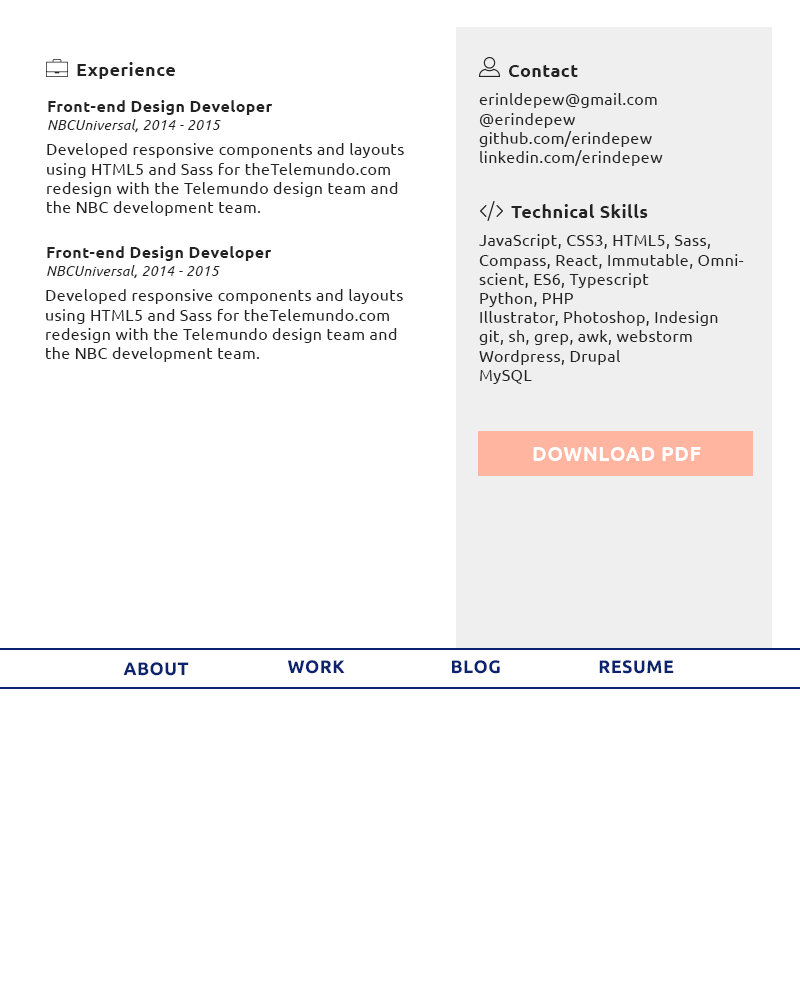
<style>
.page{position:relative;width:800px;height:1000px;background:#ffffff}
.page>*{position:absolute;margin:0}
.t1{font:18px "Ubuntu-Bold";letter-spacing:0.025em;color:#232323}
.t2{font:16px "Ubuntu-Bold";letter-spacing:0.025em;color:#232323}
.t3{font:14px/18px "Ubuntu-Italic";letter-spacing:0.025em;color:#232323}
.t4{font:16px "Ubuntu";letter-spacing:0.025em;color:#232323}
.t5{font:20px "Ubuntu-Bold";letter-spacing:0.025em;color:#ffffff}
.t6{font:18px "Ubuntu-Bold";letter-spacing:0.025em;color:#0c2370}
</style>
<div class="page">
<p class="t1" style="left:77px;top:62px;width:98px;height:17px">Experience</p>
<p class="t1" style="left:509px;top:65px;width:69px;height:12px">Contact</p>
<p class="t2" style="left:48px;top:100px;width:224px;height:33px">Front-end Design Developer<br><span class="t3">NBCUniversal, 2014 - 2015</span></p>
<p class="t4" style="left:479px;top:93px;width:184px;height:73px">erinldepew@gmail.com<br>@erindepew<br>github.com/erindepew<br>linkedin.com/erindepew</p>
<p class="t4" style="left:47px;top:143px;width:357px;height:73px">Developed responsive components and layouts using HTML5 and Sass for theTelemundo.com redesign with the Telemundo design team and the NBC development team.</p>
<p class="t1" style="left:511px;top:204px;width:137px;height:14px">Technical Skills</p>
<p class="t2" style="left:47px;top:246px;width:224px;height:33px">Front-end Design Developer<br><span class="t3">NBCUniversal, 2014 - 2015</span></p>
<p class="t4" style="left:479px;top:234px;width:265px;height:150px">JavaScript, CSS3, HTML5, Sass, Compass, React, Immutable, Omniscient, ES6, Typescript<br>Python, PHP<br>Illustrator, Photoshop, Indesign<br>git, sh, grep, awk, webstorm<br>Wordpress, Drupal <br>MySQL</p>
<p class="t4" style="left:46px;top:289px;width:357px;height:73px">Developed responsive components and layouts using HTML5 and Sass for theTelemundo.com redesign with the Telemundo design team and the NBC development team.</p>
<p class="t5" style="left:533px;top:447px;width:168px;height:14px">DOWNLOAD PDF</p>
<p class="t6" style="left:123px;top:662px;width:66px;height:14px">ABOUT</p>
<p class="t6" style="left:288px;top:660px;width:57px;height:14px">WORK</p>
<p class="t6" style="left:452px;top:660px;width:48px;height:14px">BLOG</p>
<p class="t6" style="left:599px;top:660px;width:75px;height:14px">RESUME</p>
</div>
